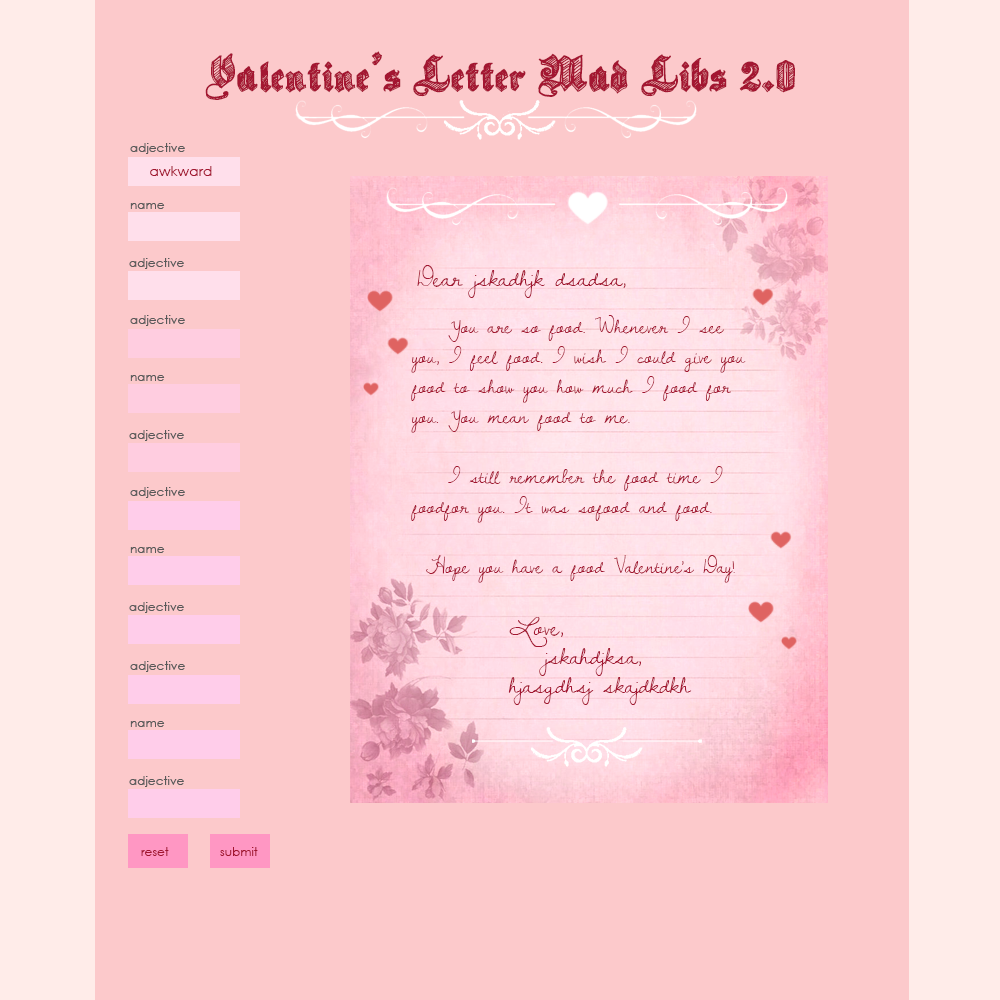
<style>
.page{position:relative;width:1000px;height:1000px;background:#fcc9cb}
.page>*{position:absolute;margin:0}
.t1{font:50px "SketchGothicSchool";color:#a31631}
.t2{font:14px "CenturyGothic";color:#a31631}
.t3{font:24px "DawningofaNewDay";color:#a31631}
.t4{font:20px/30px "DawningofaNewDay";color:#a31631}
.t5{font:12px "CenturyGothic";color:#a31631}
</style>
<div class="page">
<p class="t1" style="left:205px;top:51px;width:590px;height:49px">Valentine’s Letter Mad Libs 2.0</p>
<p class="t2" style="left:150px;top:166px;width:62px;height:10px">awkward</p>
<p class="t3" style="left:417px;top:265px;width:209px;height:33px">Dear jskadhjk dsadsa,</p>
<p class="t4" style="left:411px;top:315px;width:335px;height:268px">You are so food. Whenever I see you, I feel food. I wish I could give you food to show you how much I food for you. You mean food to me.<br> <br> I still remember the food time I foodfor you. It was sofood and food.<br><br>Hope you have a food Valentine's Day!</p>
<p class="t3" style="left:508px;top:617px;width:184px;height:88px">Love, <br> jskahdjksa,<br>hjasgdhsj skajdkdkh</p>
<p class="t5" style="left:141px;top:847px;width:28px;height:9px">reset</p>
<p class="t5" style="left:220px;top:847px;width:38px;height:9px">submit</p>
</div>
